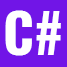
<style>
.page{position:relative;width:67px;height:67px;background:#7115e7}
.page>*{position:absolute;margin:0}
.t1{font:55px "Oswald-Bold";color:#ffffff}
</style>
<div class="page">
<p class="t1" style="left:5px;top:10px;width:56px;height:46px">C#</p>
</div>
